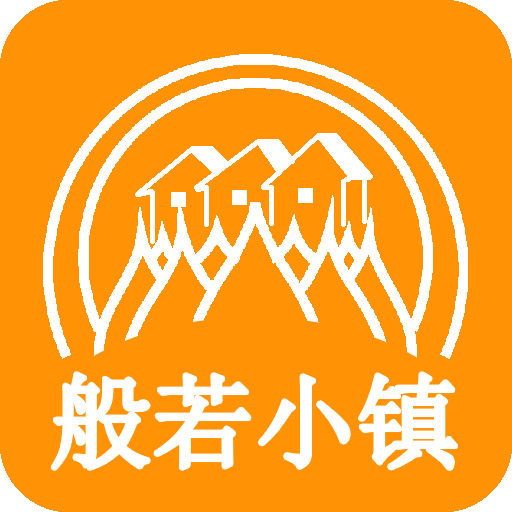
<style>
.page{position:relative;width:512px;height:512px;background:#ff9205}
.page>*{position:absolute;margin:0}
.t1{font:102.2px "SimSun";color:#ffffff}
</style>
<div class="page">
<p class="t1" style="left:53px;top:374px;width:403px;height:94px">般若小镇</p>
</div>
